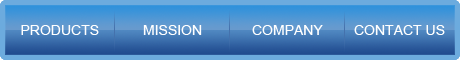
<style>
.page{position:relative;width:460px;height:60px}
.page>*{position:absolute;margin:0}
.t1{font:14px "ArialMT";color:#ffffff}
</style>
<div class="page">
<p class="t1" style="left:21px;top:25px;width:78px;height:10px">PRODUCTS</p>
<p class="t1" style="left:143px;top:25px;width:59px;height:10px">MISSION</p>
<p class="t1" style="left:252px;top:25px;width:71px;height:10px">COMPANY</p>
<p class="t1" style="left:354px;top:25px;width:91px;height:10px">CONTACT US</p>
</div>
